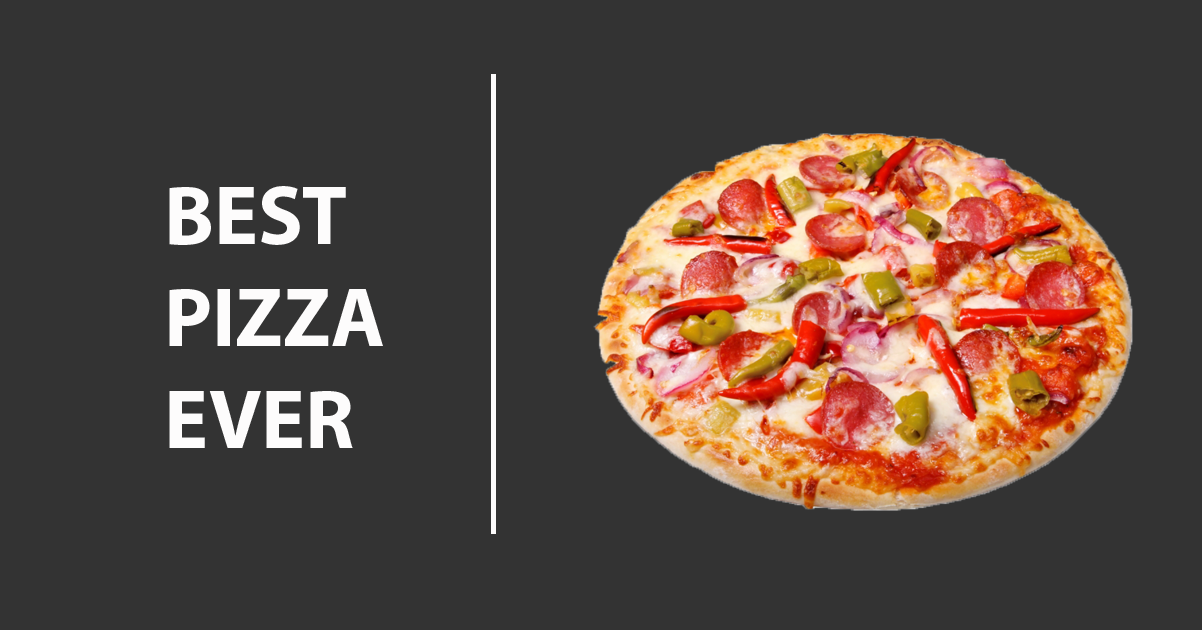
<style>
.page{position:relative;width:1202px;height:630px;background:#333333}
.page>*{position:absolute;margin:0}
.t1{font:85px "MyriadPro-Bold";color:#fdfcfc}
</style>
<div class="page">
<p class="t1" style="left:169px;top:186px;width:214px;height:262px">BEST <br>PIZZA<br>EVER</p>
</div>
